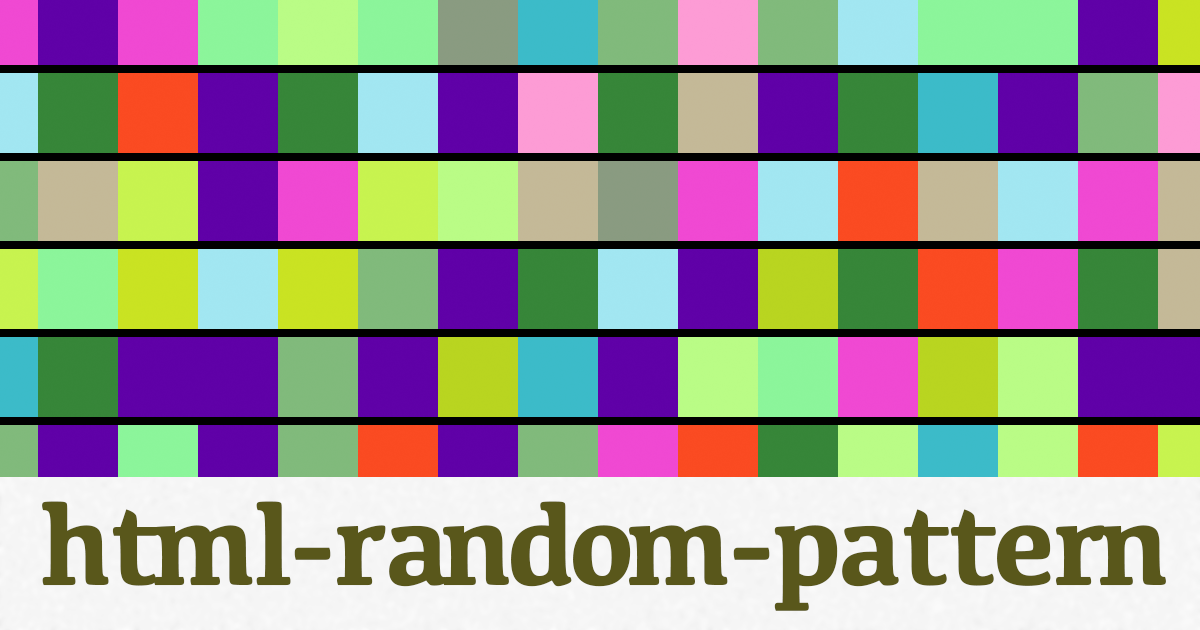
<style>
.page{position:relative;width:1200px;height:630px}
.page>*{position:absolute;margin:0}
.t1{font:120px "Kefa-Bold";letter-spacing:-0.02em;color:#59571b}
</style>
<div class="page">
<p class="t1" style="left:42px;top:501px;width:1124px;height:110px">html-random-pattern</p>
</div>
